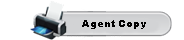
<style>
.page{position:relative;width:184px;height:40px;background:#ffffff}
.page>*{position:absolute;margin:0}
.t1{font:10px "Arial-Black";color:#000000}
</style>
<div class="page">
<p class="t1" style="left:82px;top:20px;width:64px;height:9px">Agent Copy</p>
</div>
